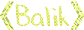
<style>
.page{position:relative;width:84px;height:30px;background:#ffffff}
.page>*{position:absolute;margin:0}
.t1{font:28px "DJBChalkItUp";color:#dee66f}
</style>
<div class="page">
<p class="t1" style="left:15px;top:4px;width:55px;height:23px">Balik</p>
</div>
